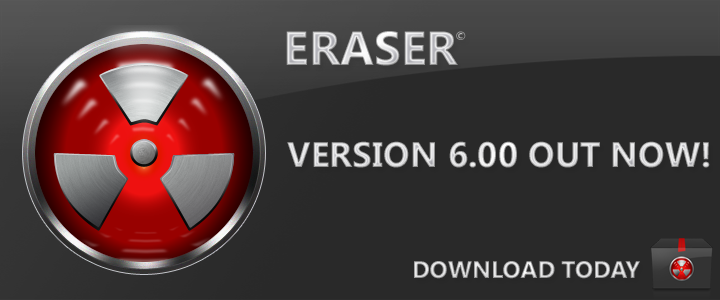
<style>
.page{position:relative;width:720px;height:300px;background:#292929}
.page>*{position:absolute;margin:0}
.t1{font:48px "SegoeUI-Bold"}
.t2{font:12px "SegoeUI-Bold";color:#b1b1b1}
.t3{font:35.3px "SegoeUI-Bold"}
.t4{font:24px "SegoeUI-Bold"}
</style>
<div class="page">
<p class="t1" style="left:286px;top:31px;width:172px;height:35px">ERASER</p>
<p class="t2" style="left:456px;top:31px;width:10px;height:9px">©</p>
<p class="t3" style="left:287px;top:141px;width:423px;height:27px">VERSION 6.00 OUT NOW!</p>
<p class="t4" style="left:414px;top:261px;width:226px;height:18px">DOWNLOAD TODAY</p>
</div>
